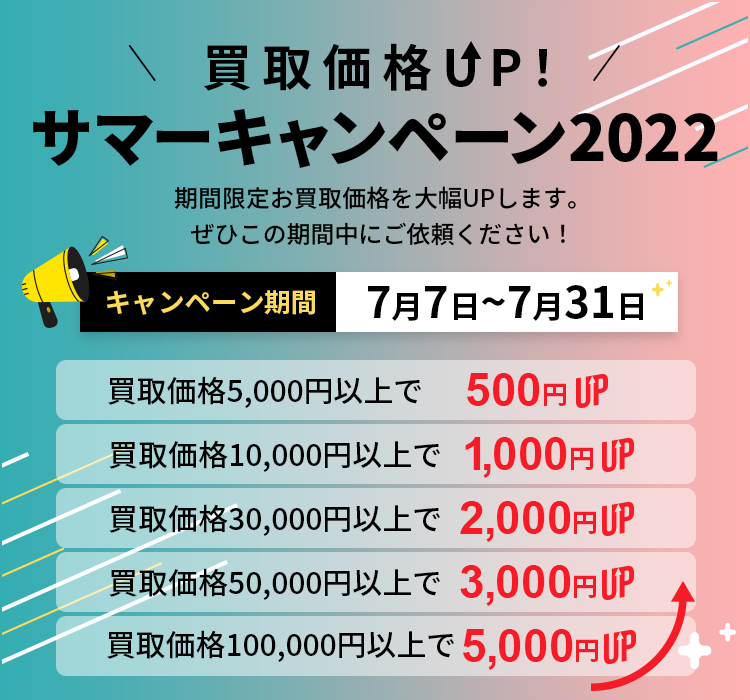
<style>
.page{position:relative;width:750px;height:700px}
.page>*{position:absolute;margin:0}
.t1{font:50px "NotoSansCJKjp-Bold";letter-spacing:0.2em;color:#000000}
.t2{font:63.1px "NotoSansCJKjp-Black";color:#000000}
.t3{font:24px/36px "NotoSansCJKjp-Medium";color:#000000}
.t4{font:26.6px "NotoSansCJKjp-Bold";color:#f8db4e}
.t5{font:44.1px "NotoSansCJKjp-Bold";color:#000000}
.t6{font:31.5px "NotoSansCJKjp-Bold";color:#000000}
.t7{font:30px "NotoSansCJKjp-Medium";color:#000000}
.t8{font:46px "Arial-BoldMT";color:#f51c28}
.t9{font:26px "NotoSansCJKjp-Bold";color:#f51c28}
</style>
<div class="page">
<p class="t1" style="left:203px;top:43px;width:344px;height:48px">買取価格UP！</p>
<p class="t2" style="left:33px;top:109px;width:685px;height:59px">サマーキャンペーン2022</p>
<p class="t3" style="left:174px;top:186px;width:402px;height:60px;text-align:center">期間限定お買取価格を大幅UPします。<br>ぜひこの期間中にご依頼ください！</p>
<p class="t4" style="left:107px;top:290px;width:208px;height:25px">キャンペーン期間</p>
<p class="t5" style="left:368px;top:285px;width:275px;height:36px">7<span class="t6">月</span>7<span class="t6">日</span>~7<span class="t6">月</span>31<span class="t6">日</span></p>
<p class="t7" style="left:108px;top:376px;width:313px;height:32px">買取価格5,000円以上で</p>
<p class="t8" style="left:467px;top:373px;width:99px;height:33px">500<span class="t9">円</span></p>
<p class="t8" style="left:465px;top:437px;width:128px;height:41px">1,000<span class="t9">円</span></p>
<p class="t7" style="left:109px;top:440px;width:331px;height:32px">買取価格10,000円以上で</p>
<p class="t7" style="left:109px;top:504px;width:331px;height:32px">買取価格30,000円以上で</p>
<p class="t8" style="left:460px;top:501px;width:136px;height:41px">2,000<span class="t9">円</span></p>
<p class="t7" style="left:109px;top:568px;width:331px;height:32px">買取価格50,000円以上で</p>
<p class="t8" style="left:460px;top:565px;width:136px;height:41px">3,000<span class="t9">円</span></p>
<p class="t7" style="left:107px;top:630px;width:347px;height:32px">買取価格100,000円以上で</p>
<p class="t8" style="left:463px;top:629px;width:135px;height:41px">5,000<span class="t9">円</span></p>
</div>
